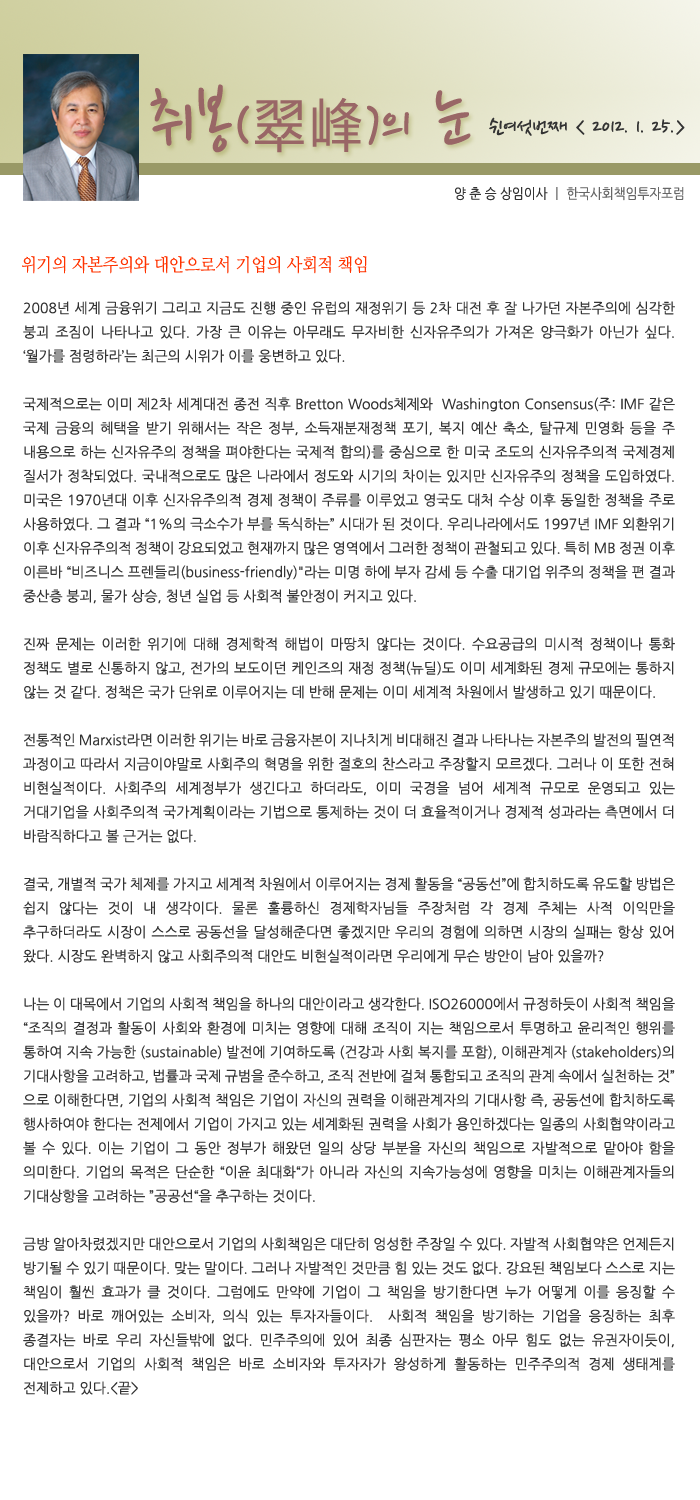
<style>
.page{position:relative;width:700px;height:1500px;background:#ffffff}
.page>*{position:absolute;margin:0}
.t1{font:77.5px "NanumPen";color:#996666}
.t2{font:60px "NanumPen";color:#996666}
.t3{font:60px "NanumGothic";color:#996666}
.t4{font:24px "NanumPen";color:#333333}
.t5{font:14px "NanumGothic";color:#666666;scale:0.9 1}
.t6{font:14px "NanumGothic";color:#333333;scale:0.9 1}
.t7{font:18px "NanumMyeongjo";color:#ff3300;scale:0.9 1}
.t8{font:14px/24px "NanumGothic";color:#333333}
</style>
<div class="page">
<p class="t1" style="left:150px;top:84px;width:321px;height:69px">취봉<span class="t2">(</span><span class="t3">翠峰</span><span class="t2">)</span><span class="t2">의</span> 눈</p>
<p class="t4" style="left:489px;top:117px;width:196px;height:19px">쉰여섯번째 &lt; 2012. 1. 25.&gt;</p>
<p class="t5" style="left:455px;top:187px;width:229px;height:14px"><span class="t6">양 춘 승 상임이사 </span>ㅣ 한국사회책임투자포럼</p>
<p class="t7" style="left:22px;top:256px;width:345px;height:18px">위기의 자본주의와 대안으로서 기업의 사회적 책임</p>
<p class="t8" style="left:23px;top:301px;width:652px;height:1094px;text-align:justify">2008년 세계 금융위기 그리고 지금도 진행 중인 유럽의 재정위기 등 2차 대전 후 잘 나가던 자본주의에 심각한 붕괴 조짐이 나타나고 있다. 가장 큰 이유는 아무래도 무자비한 신자유주의가 가져온 양극화가 아닌가 싶다. ‘월가를 점령하라’는 최근의 시위가 이를 웅변하고 있다. <br><br>국제적으로는 이미 제2차 세계대전 종전 직후 Bretton Woods체제와  Washington Consensus(주: IMF 같은 국제 금융의 혜택을 받기 위해서는 작은 정부, 소득재분재정책 포기, 복지 예산 축소, 탈규제 민영화 등을 주 내용으로 하는 신자유주의 정책을 펴야한다는 국제적 합의)를 중심으로 한 미국 조도의 신자유주의적 국제경제 질서가 정착되었다. 국내적으로도 많은 나라에서 정도와 시기의 차이는 있지만 신자유주의 정책을 도입하였다. 미국은 1970년대 이후 신자유주의적 경제 정책이 주류를 이루었고 영국도 대처 수상 이후 동일한 정책을 주로 사용하였다. 그 결과 “1%의 극소수가 부를 독식하는” 시대가 된 것이다. 우리나라에서도 1997년 IMF 외환위기 이후 신자유주의적 정책이 강요되었고 현재까지 많은 영역에서 그러한 정책이 관철되고 있다. 특히 MB 정권 이후 이른바 “비즈니스 프렌들리(business-friendly)"라는 미명 하에 부자 감세 등 수출 대기업 위주의 정책을 편 결과 중산층 붕괴, 물가 상승, 청년 실업 등 사회적 불안정이 커지고 있다. <br><br>진짜 문제는 이러한 위기에 대해 경제학적 해법이 마땅치 않다는 것이다. 수요공급의 미시적 정책이나 통화 정책도 별로 신통하지 않고, 전가의 보도이던 케인즈의 재정 정책(뉴딜)도 이미 세계화된 경제 규모에는 통하지 않는 것 같다. 정책은 국가 단위로 이루어지는 데 반해 문제는 이미 세계적 차원에서 발생하고 있기 때문이다. <br><br>전통적인 Marxist라면 이러한 위기는 바로 금융자본이 지나치게 비대해진 결과 나타나는 자본주의 발전의 필연적 과정이고 따라서 지금이야말로 사회주의 혁명을 위한 절호의 찬스라고 주장할지 모르겠다. 그러나 이 또한 전혀 비현실적이다. 사회주의 세계정부가 생긴다고 하더라도, 이미 국경을 넘어 세계적 규모로 운영되고 있는 거대기업을 사회주의적 국가계획이라는 기법으로 통제하는 것이 더 효율적이거나 경제적 성과라는 측면에서 더 바람직하다고 볼 근거는 없다. <br><br>결국, 개별적 국가 체제를 가지고 세계적 차원에서 이루어지는 경제 활동을 “공동선”에 합치하도록 유도할 방법은 쉽지 않다는 것이 내 생각이다. 물론 훌륭하신 경제학자님들 주장처럼 각 경제 주체는 사적 이익만을 추구하더라도 시장이 스스로 공동선을 달성해준다면 좋겠지만 우리의 경험에 의하면 시장의 실패는 항상 있어 왔다. 시장도 완벽하지 않고 사회주의적 대안도 비현실적이라면 우리에게 무슨 방안이 남아 있을까?<br><br>나는 이 대목에서 기업의 사회적 책임을 하나의 대안이라고 생각한다. ISO26000에서 규정하듯이 사회적 책임을 “조직의 결정과 활동이 사회와 환경에 미치는 영향에 대해 조직이 지는 책임으로서 투명하고 윤리적인 행위를 통하여 지속 가능한 (sustainable) 발전에 기여하도록 (건강과 사회 복지를 포함), 이해관계자 (stakeholders)의 기대사항을 고려하고, 법률과 국제 규범을 준수하고, 조직 전반에 걸쳐 통합되고 조직의 관계 속에서 실천하는 것”으로 이해한다면, 기업의 사회적 책임은 기업이 자신의 권력을 이해관계자의 기대사항 즉, 공동선에 합치하도록 행사하여야 한다는 전제에서 기업이 가지고 있는 세계화된 권력을 사회가 용인하겠다는 일종의 사회협약이라고 볼 수 있다. 이는 기업이 그 동안 정부가 해왔던 일의 상당 부분을 자신의 책임으로 자발적으로 맡아야 함을 의미한다. 기업의 목적은 단순한 “이윤 최대화“가 아니라 자신의 지속가능성에 영향을 미치는 이해관계자들의 기대상항을 고려하는 ”공공선“을 추구하는 것이다. <br><br>금방 알아차렸겠지만 대안으로서 기업의 사회책임은 대단히 엉성한 주장일 수 있다. 자발적 사회협약은 언제든지 방기될 수 있기 때문이다. 맞는 말이다. 그러나 자발적인 것만큼 힘 있는 것도 없다. 강요된 책임보다 스스로 지는 책임이 훨씬 효과가 클 것이다. 그럼에도 만약에 기업이 그 책임을 방기한다면 누가 어떻게 이를 응징할 수 있을까? 바로 깨어있는 소비자, 의식 있는 투자자들이다.  사회적 책임을 방기하는 기업을 응징하는 최후 종결자는 바로 우리 자신들밖에 없다. 민주주의에 있어 최종 심판자는 평소 아무 힘도 없는 유권자이듯이, 대안으로서 기업의 사회적 책임은 바로 소비자와 투자자가 왕성하게 활동하는 민주주의적 경제 생태계를 전제하고 있다.&lt;끝&gt;</p>
</div>
